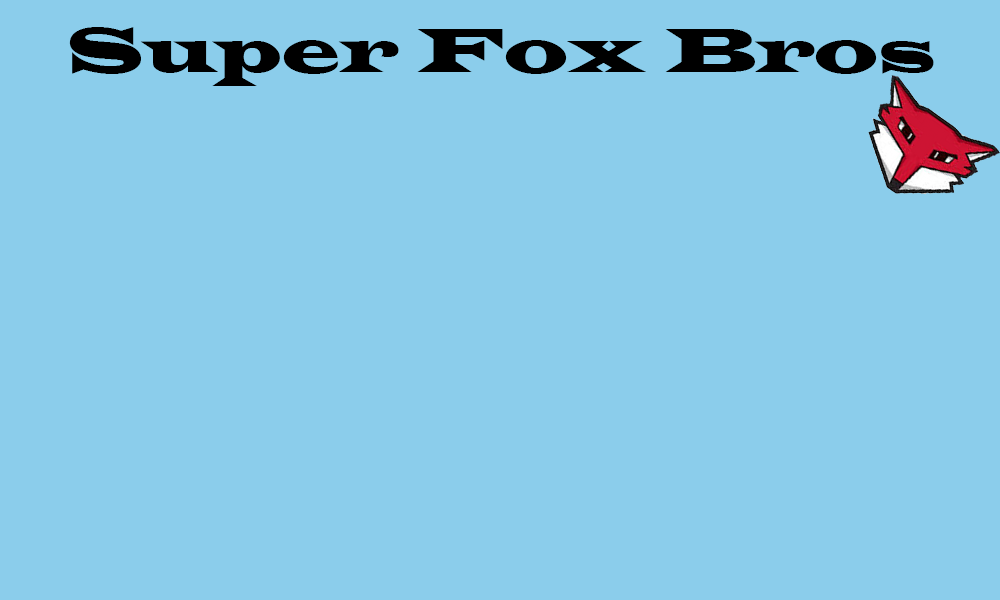
<style>
.page{position:relative;width:1000px;height:600px;background:#8bcdeb}
.page>*{position:absolute;margin:0}
.t1{font:64.7px "LatinWide";color:#000000}
</style>
<div class="page">
<p class="t1" style="left:69px;top:27px;width:865px;height:59px">Super Fox Bros</p>
</div>
